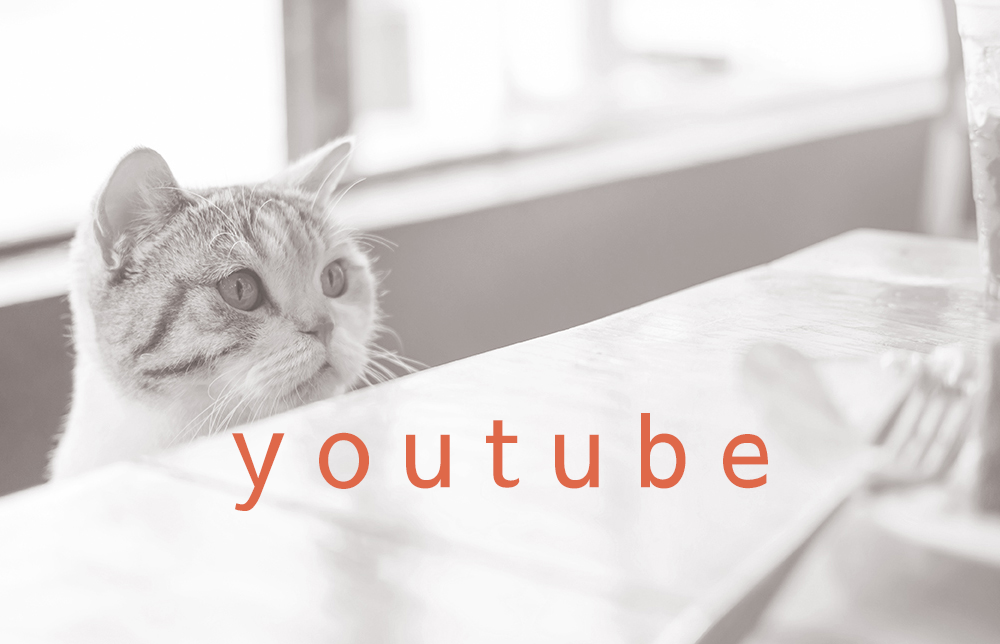
<style>
.page{position:relative;width:1000px;height:644px}
.page>*{position:absolute;margin:0}
.t1{font:100px "SawarabiGothic-Regular";letter-spacing:0.3em;color:#df6849}
</style>
<div class="page">
<p class="t1" style="left:232px;top:413px;width:536px;height:98px">youtube</p>
</div>
